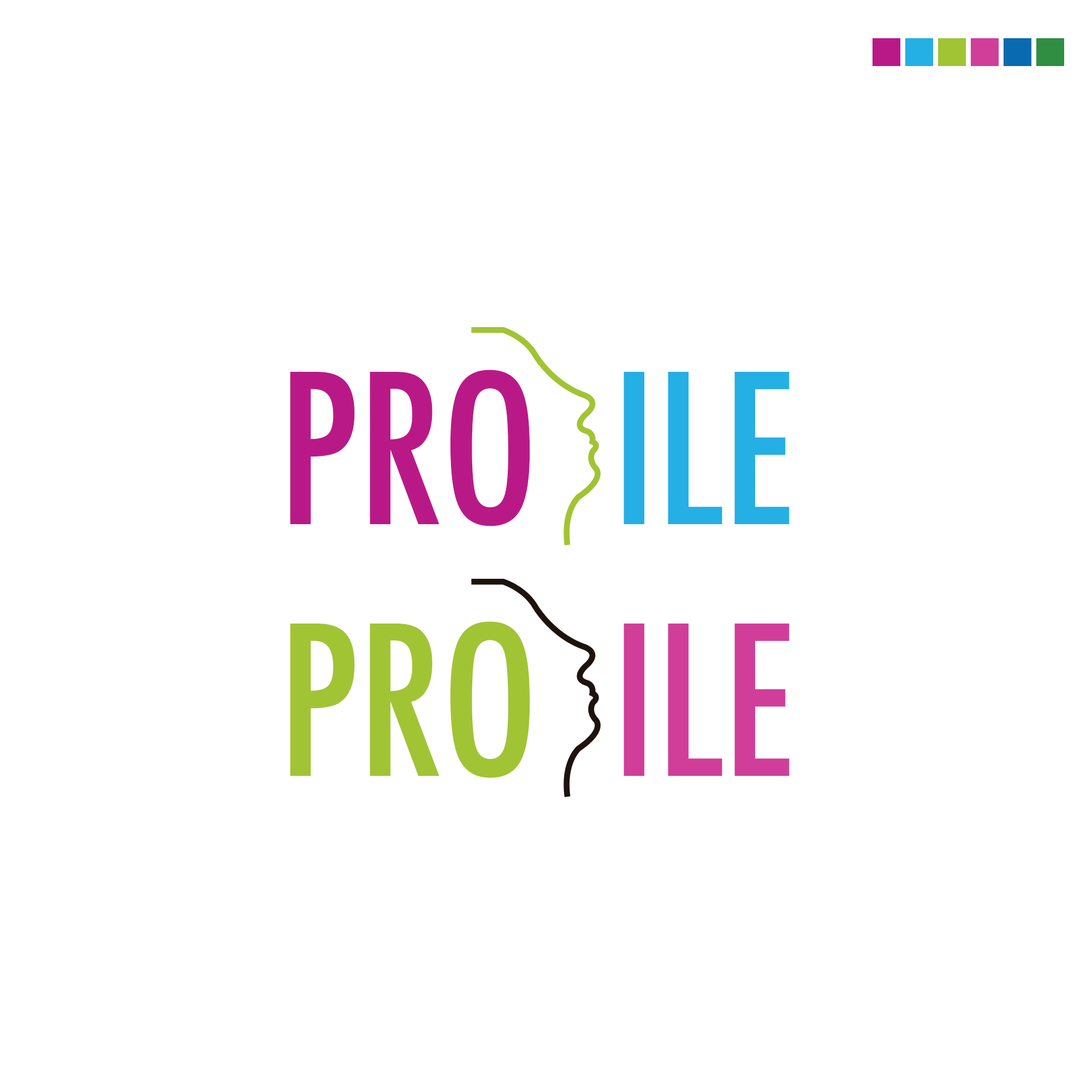
<style>
.page{position:relative;width:1092px;height:1092px;background:#ffffff}
.page>*{position:absolute;margin:0}
.t1{font:202.1px "Futura-CondensedMedium";color:#b91987}
.t2{font:202.1px "Futura-CondensedMedium";color:#24afe5}
.t3{font:202.1px "Futura-CondensedMedium";color:#a1c434}
.t4{font:202.1px "Futura-CondensedMedium";color:#d03e9a}
</style>
<div class="page">
<p class="t1" style="left:290px;top:370px;width:240px;height:156px">PRO</p>
<p class="t2" style="left:624px;top:372px;width:166px;height:152px">ILE</p>
<p class="t3" style="left:290px;top:621px;width:240px;height:157px">PRO</p>
<p class="t4" style="left:624px;top:624px;width:166px;height:152px">ILE</p>
</div>
